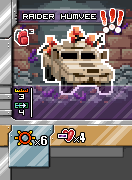
<style>
.page{position:relative;width:132px;height:180px}
.page>*{position:absolute;margin:0}
.t1{font:10px "VisitorTT1BRK";color:#ffffff}
.t2{font:12px "VisitorTT2BRK";letter-spacing:0.025em;color:#ffffff}
.t3{font:12px "VisitorTT2BRK";letter-spacing:-0.075em;color:#ffffff}
.t4{font:12px "Impact";letter-spacing:-0.075em;color:#ffffff}
</style>
<div class="page">
<p class="t1" style="left:23px;top:14px;width:73px;height:5px">Raider Humvee</p>
<p class="t2" style="left:29px;top:29px;width:5px;height:5px">3</p>
<p class="t3" style="left:19px;top:94px;width:5px;height:5px">3</p>
<p class="t3" style="left:19px;top:110px;width:5px;height:5px">4</p>
<p class="t4" style="left:41px;top:136px;width:6px;height:9px">6</p>
<p class="t4" style="left:80px;top:133px;width:5px;height:9px">4</p>
</div>
